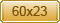
<style>
.page{position:relative;width:60px;height:23px}
.page>*{position:absolute;margin:0}
.t1{font:13px "ArialMT";color:#775100}
</style>
<div class="page">
<p class="t1" style="left:12px;top:6px;width:35px;height:10px">60x23</p>
</div>
